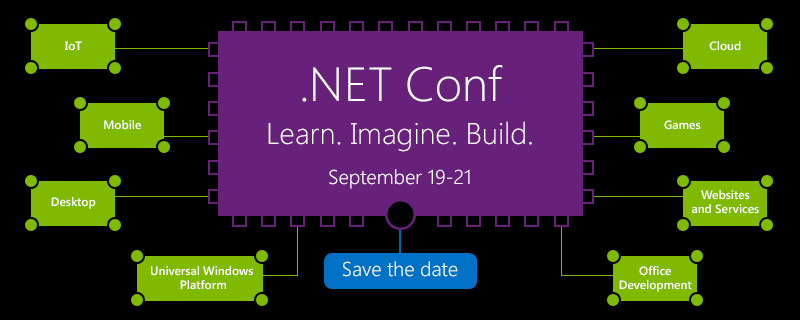
<style>
.page{position:relative;width:800px;height:320px;background:#000000}
.page>*{position:absolute;margin:0}
.t1{font:12px "SegoeUI-SemiBold";color:#ffffff}
.t2{font:30px/43px "SegoeUI-Light";color:#ffffff}
.t3{font:48px/41.7px "SegoeUI-Light";color:#ffffff}
.t4{font:20px/40px "SegoeUI-Semilight";color:#ffffff}
.t5{font:12px/14.7px "SegoeUI-SemiBold";color:#ffffff}
.t6{font:20px "SegoeUI-Semilight";color:#ffffff}
</style>
<div class="page">
<p class="t1" style="left:65px;top:41px;width:17px;height:10px">IoT</p>
<p class="t1" style="left:709px;top:41px;width:32px;height:10px">Cloud</p>
<p class="t2" style="left:268px;top:65px;width:264px;height:124px;text-align:center"><span class="t3">.NET Conf<br></span>Learn. Imagine. Build.<br><span class="t4">September 19-21</span></p>
<p class="t1" style="left:104px;top:120px;width:37px;height:10px">Mobile</p>
<p class="t1" style="left:664px;top:120px;width:37px;height:10px">Games</p>
<p class="t1" style="left:51px;top:197px;width:45px;height:12px">Desktop</p>
<p class="t5" style="left:692px;top:190px;width:67px;height:24px;text-align:center">Websites<br>and Services</p>
<p class="t5" style="left:151px;top:266px;width:102px;height:24px;text-align:center">Universal Windows <br>Platform</p>
<p class="t6" style="left:343px;top:261px;width:115px;height:16px">Save the date</p>
<p class="t5" style="left:619px;top:266px;width:73px;height:26px;text-align:center">Office<br>Development</p>
</div>
